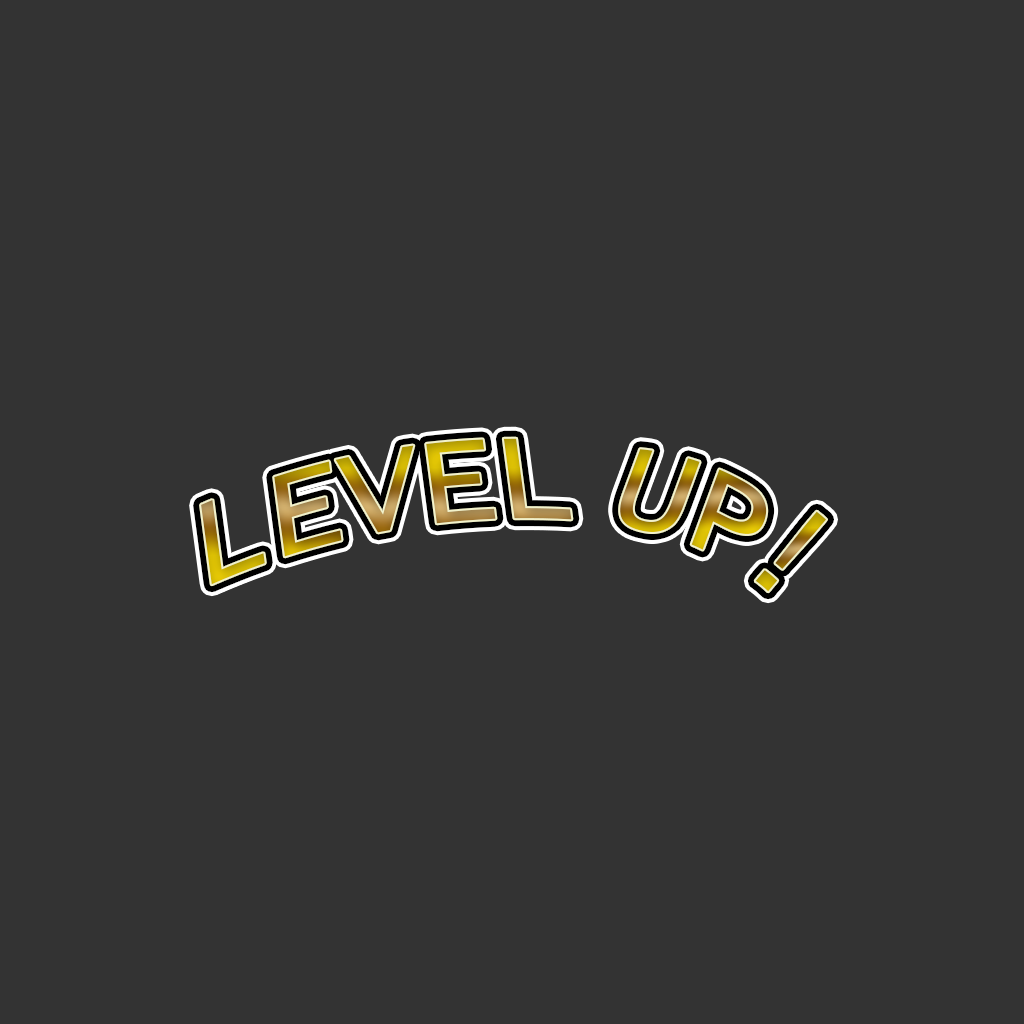
<style>
.page{position:relative;width:1024px;height:1024px;background:#333333}
.page>*{position:absolute;margin:0}
.t1{font:127.7px "LucidaConsole"}
</style>
<div class="page">
<p class="t1" style="left:201px;top:438px;width:371px;height:147px;rotate:-8deg">LEVEL</p>
<p class="t1" style="left:620px;top:449px;width:147px;height:101px;rotate:20deg">UP</p>
<p class="t1" style="left:755px;top:511px;width:72px;height:81px;rotate:40deg">!</p>
</div>
